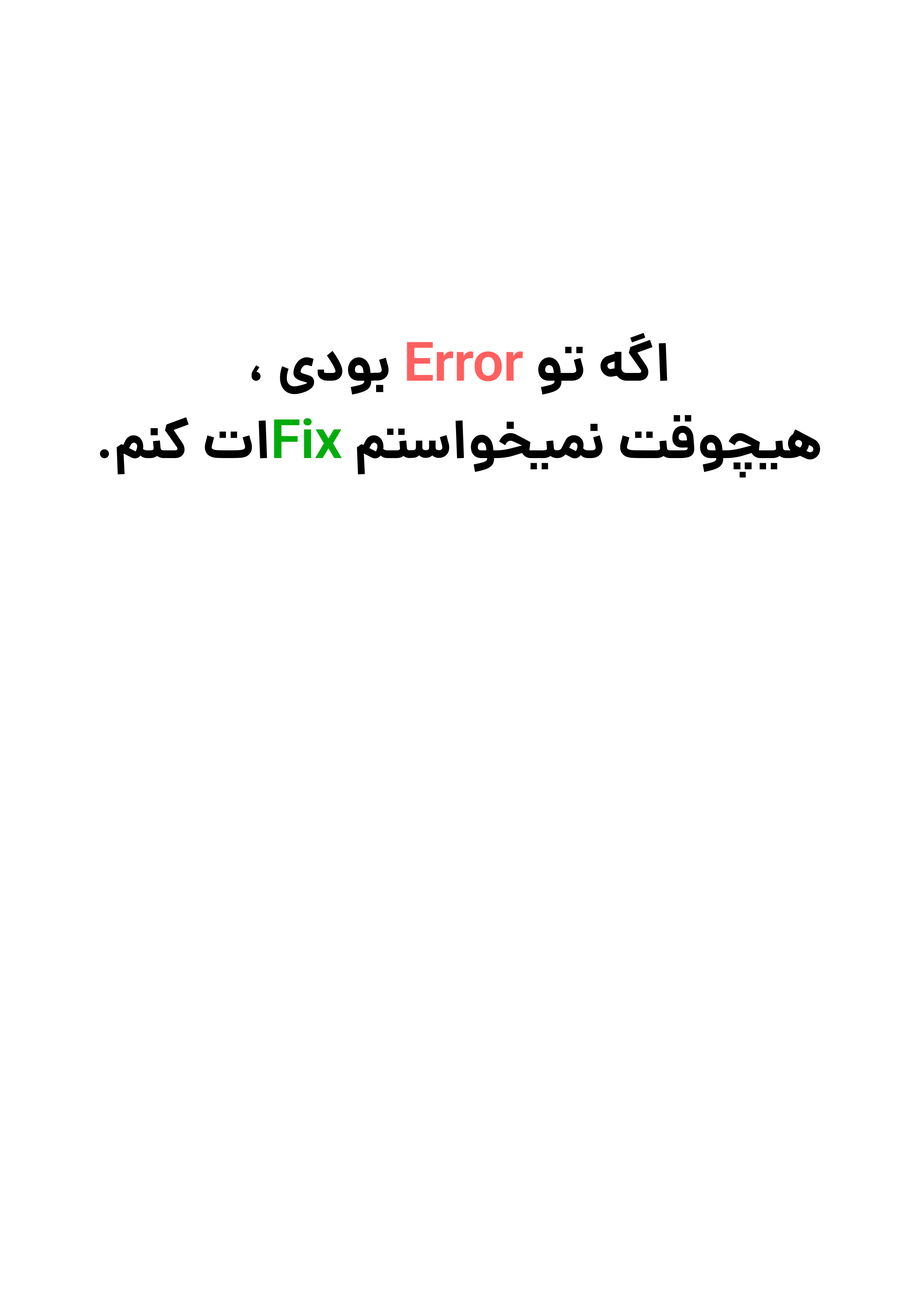
<style>
.page{position:relative;width:918px;height:1299px;background:#ffffff}
.page>*{position:absolute;margin:0}
.t1{font:54.2px/77.1px "Dana-Bold";color:#000000}
.t2{font:54.2px/77.1px "Dana-Bold";color:#ff5f5f}
.t3{font:54.2px/77.1px "Dana-Bold";color:#00ac0c}
</style>
<div class="page">
<p class="t1" style="left:100px;top:333px;width:720px;height:145px;text-align:center">اگه تو <span class="t2">Error</span> بودی ،<br>هیچوقت نمیخواستم <span class="t3">Fix</span>ات کنم.</p>
</div>
